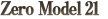
<style>
.page{position:relative;width:108px;height:19px;background:#ffffff}
.page>*{position:absolute;margin:0}
.t1{font:18px "RyuminPro-ExBold";letter-spacing:-0.08em;color:#4a3f32;font-weight:bold;scale:0.9 1}
</style>
<div class="page">
<p class="t1" style="left:0px;top:1px;width:100px;height:15px">Zero Model 21</p>
</div>
